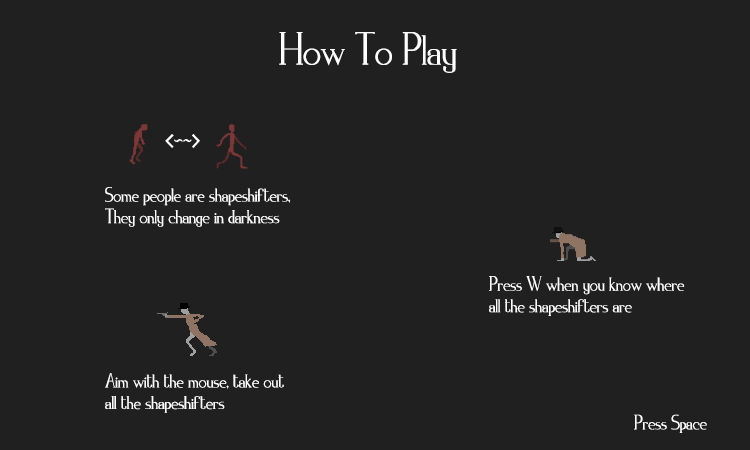
<style>
.page{position:relative;width:750px;height:450px;background:#202020}
.page>*{position:absolute;margin:0}
.t1{font:40.8px "Zorus_Serif";color:#ffffff}
.t2{font:18px "Zorus_Serif";color:#ffffff}
.t3{font:17.9px "Zorus_Serif";color:#ffffff}
.t4{font:18.1px "Zorus_Serif";color:#ffffff}
</style>
<div class="page">
<p class="t1" style="left:279px;top:32px;width:178px;height:41px">How To Play</p>
<p class="t2" style="left:105px;top:187px;width:186px;height:40px">Some people are shapeshifters,<br>They only change in darkness</p>
<p class="t2" style="left:489px;top:276px;width:196px;height:40px">Press W when you know where <br>all the shapeshifters are</p>
<p class="t3" style="left:105px;top:373px;width:179px;height:40px">Aim with the mouse, take out <br>all the shapeshifters</p>
<p class="t4" style="left:634px;top:414px;width:73px;height:19px">Press Space</p>
</div>
